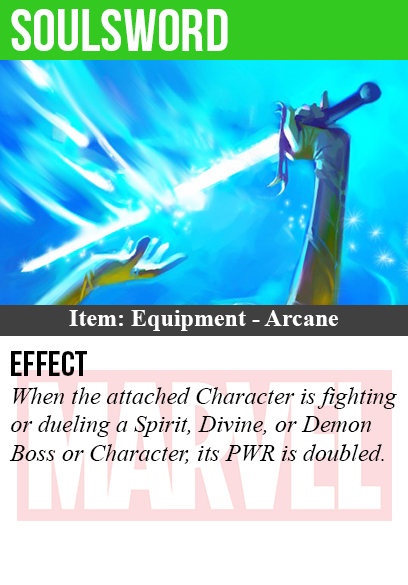
<style>
.page{position:relative;width:408px;height:585px;background:#ffffff}
.page>*{position:absolute;margin:0}
.t1{font:60px "BebasNeue";color:#ffffff}
.t2{font:24px "TimesNewRomanPS-BoldMT";color:#ffffff}
.t3{font:36px "BebasNeue";color:#000000}
.t4{font:24px "TimesNewRomanPS-ItalicMT";color:#000000}
</style>
<div class="page">
<p class="t1" style="left:11px;top:9px;width:217px;height:42px">soulsword</p>
<p class="t2" style="left:69px;top:310px;width:269px;height:21px">Item: Equipment - Arcane</p>
<p class="t3" style="left:11px;top:351px;width:76px;height:25px">Effect</p>
<p class="t4" style="left:9px;top:387px;width:388px;height:77px">When the attached Character is fighting<br>or dueling a Spirit, Divine, or Demon<br>Boss or Character, its PWR is doubled.</p>
</div>
